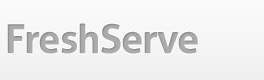
<style>
.page{position:relative;width:264px;height:80px}
.page>*{position:absolute;margin:0}
.t1{font:40px "Aller-Bold";letter-spacing:-0.025em;color:#acacac}
</style>
<div class="page">
<p class="t1" style="left:7px;top:23px;width:191px;height:31px">FreshServe</p>
</div>
